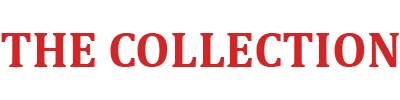
<style>
.page{position:relative;width:400px;height:100px;background:#ffffff}
.page>*{position:absolute;margin:0}
.t1{font:50px "Cambria-Bold";color:#d32526}
</style>
<div class="page">
<p class="t1" style="left:1px;top:33px;width:398px;height:34px">THE COLLECTION</p>
</div>
